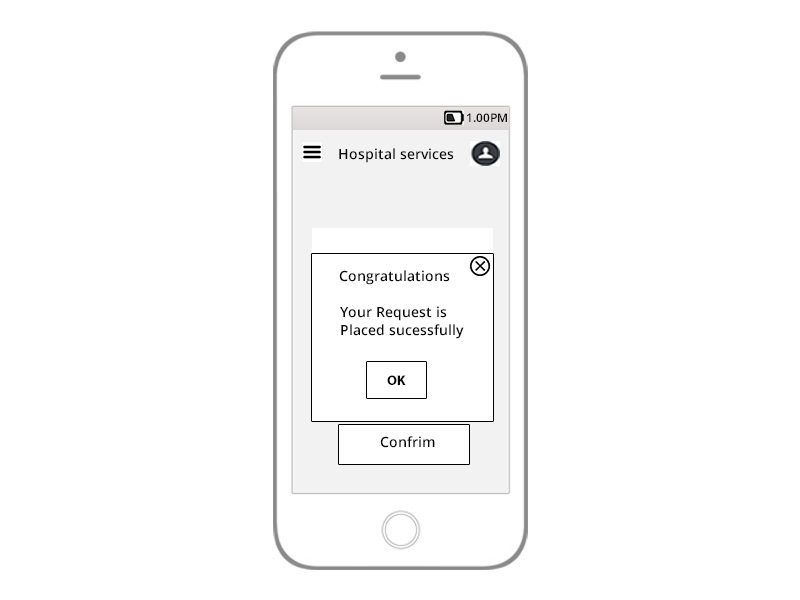
<style>
.page{position:relative;width:800px;height:600px;background:#ffffff}
.page>*{position:absolute;margin:0}
.t1{font:12px "OpenSans-Semibold";color:#090909}
.t2{font:14px "OpenSans-Semibold";color:#090909}
.t3{font:14px/6px "OpenSans-Semibold";color:#090909}
.t4{font:12px/6px "OpenSans-Semibold";color:#090909}
.t5{font:14px "MyriadPro-Bold";color:#000000}
</style>
<div class="page">
<p class="t1" style="left:467px;top:113px;width:40px;height:9px"><span class="t2">                                         </span>1.00PM</p>
<p class="t2" style="left:339px;top:148px;width:115px;height:15px">Hospital services</p>
<p class="t3" style="left:339px;top:270px;width:125px;height:69px"><span class="t4"><br> <br>       <br>         </span>Congratulations<br> <br> <br>     <br>       <br><br>       Your Request is<br><br><br>       Placed sucessfully</p>
<p class="t5" style="left:387px;top:375px;width:19px;height:10px"><span class="t1"><br>  <br>     </span> OK</p>
<p class="t2" style="left:380px;top:436px;width:55px;height:12px"><span class="t1"><br>   <br>     </span>Confrim</p>
</div>
